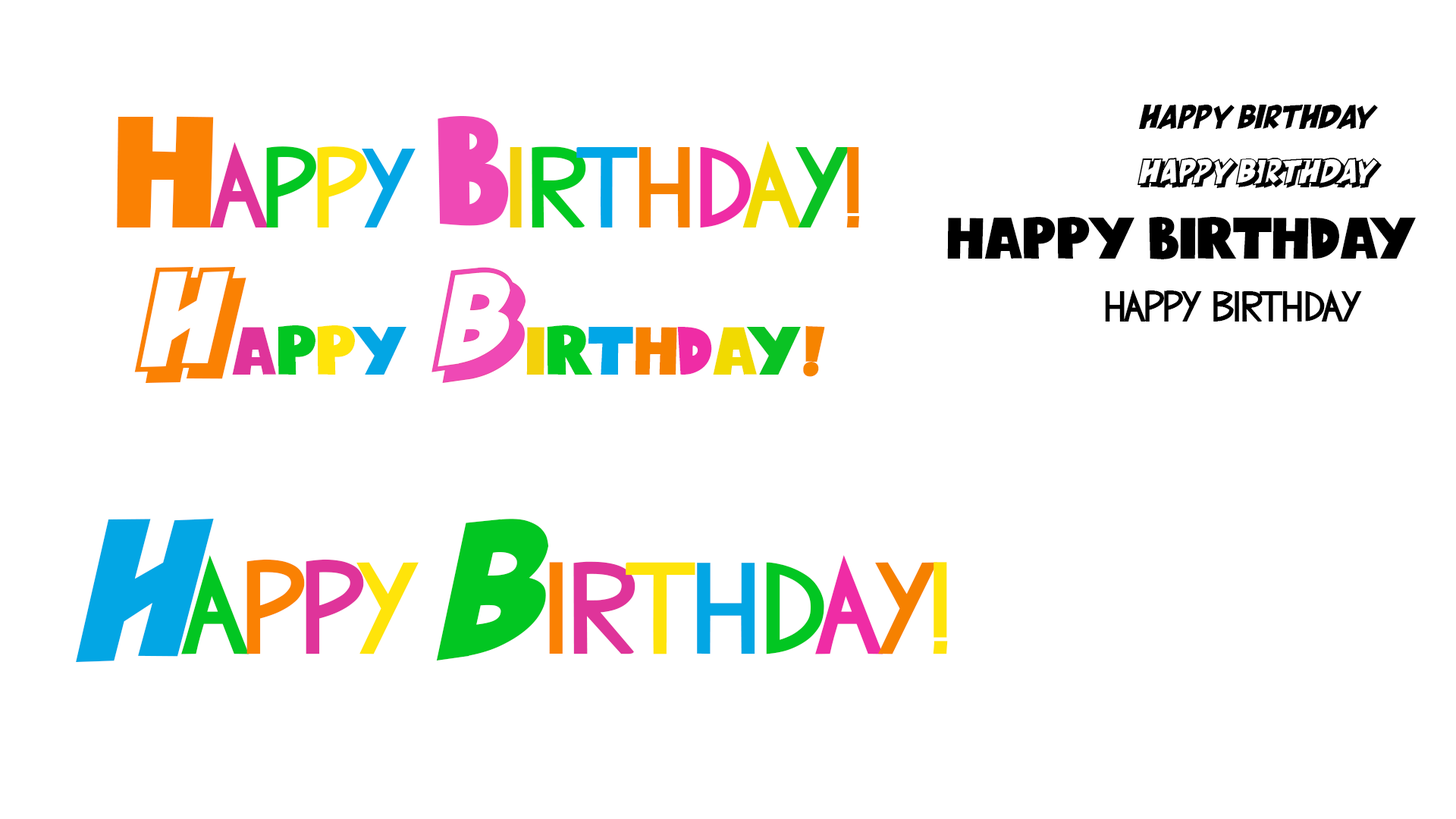
<style>
.page{position:relative;width:1456px;height:819px;background:#ffffff}
.page>*{position:absolute;margin:0}
.t1{font:54.6px "SIMPLCITYPERSONALUSE-Regular";color:#000000}
.t2{font:148.4px "BlueNight-Regular";color:#fa8103}
.t3{font:140.2px "BlueNight-Regular";color:#ef49b5;scale:0.94 1}
.t4{font:144px "birthdaycard";color:#df349a}
.t5{font:144px "birthdaycard";color:#02c622}
.t6{font:144px "birthdaycard";color:#ffe40a}
.t7{font:144px "birthdaycard";color:#03a6e4}
.t8{font:146.4px "birthdaycard";color:#f3d10b}
.t9{font:146.4px "birthdaycard";color:#00c821}
.t10{font:146.4px "birthdaycard";color:#01a6e7}
.t11{font:146.4px "birthdaycard";color:#f68100}
.t12{font:146.4px "birthdaycard";color:#ef2ca5}
.t13{font:146.4px "birthdaycard";color:#f1da01}
.t14{font:146.4px "birthdaycard";color:#0ac224}
.t15{font:54.6px "SIMPLICITYSHADOWPERSONALUSE-Reg";color:#000000}
.t16{font:54.6px "BlueNight-Regular";color:#000000}
.t17{font:216.1px "SIMPLICITYSHADOWPERSONALUSE-Reg";color:#fa8103}
.t18{font:216.1px "SIMPLICITYSHADOWPERSONALUSE-Reg";color:#eb479e}
.t19{font:54.6px "birthdaycard";color:#000000}
.t20{font:63.5px "BlueNight-Regular";color:#df349a}
.t21{font:63.5px "BlueNight-Regular";color:#02c622}
.t22{font:63.5px "BlueNight-Regular";color:#ffe40a}
.t23{font:63.5px "BlueNight-Regular";color:#03a6e4}
.t24{font:63.5px "BlueNight-Regular";color:#f3d10b}
.t25{font:63.5px "BlueNight-Regular";color:#00c821}
.t26{font:63.5px "BlueNight-Regular";color:#01a6e7}
.t27{font:63.5px "BlueNight-Regular";color:#f68100}
.t28{font:63.5px "BlueNight-Regular";color:#ef2ca5}
.t29{font:63.5px "BlueNight-Regular";color:#f1da01}
.t30{font:63.5px "BlueNight-Regular";color:#0ac224}
.t31{font:63.5px "BlueNight-Regular";color:#f68400}
.t32{font:325.7px "SIMPLCITYPERSONALUSE-Regular";color:#03a6e4}
.t33{font:325.7px "SIMPLCITYPERSONALUSE-Regular";color:#02c622}
.t34{font:167.1px "birthdaycard";color:#02c622}
.t35{font:167.1px "birthdaycard";color:#fa8103}
.t36{font:167.1px "birthdaycard";color:#df349a}
.t37{font:167.1px "birthdaycard";color:#ffe40a}
.t38{font:167.1px "birthdaycard";color:#03a6e4}
.t39{font:167.1px "birthdaycard";color:#ef2ca5}
.t40{font:167.1px "birthdaycard";color:#f68100}
</style>
<div class="page">
<p class="t1" style="left:1138px;top:105px;width:240px;height:24px">HAPpy birthday</p>
<p class="t2" style="left:117px;top:116px;width:97px;height:111px">H</p>
<p class="t3" style="left:438px;top:116px;width:71px;height:110px">B</p>
<p class="t4" style="left:209px;top:142px;width:207px;height:85px">a<span class="t5">p</span><span class="t6">p</span><span class="t7">y</span></p>
<p class="t8" style="left:510px;top:140px;width:350px;height:88px">i<span class="t9">r</span><span class="t10">T</span><span class="t11">h</span><span class="t12">d</span><span class="t13">a</span><span class="t14">y</span><span class="t11">!</span></p>
<p class="t15" style="left:1137px;top:158px;width:245px;height:30px">happy birthday</p>
<p class="t16" style="left:947px;top:217px;width:469px;height:42px">HAPPY BIRTHDAY</p>
<p class="t17" style="left:134px;top:267px;width:112px;height:116px">H</p>
<p class="t18" style="left:431px;top:267px;width:95px;height:116px">B</p>
<p class="t19" style="left:1105px;top:289px;width:257px;height:33px">hAPPY BIRTHday</p>
<p class="t20" style="left:232px;top:325px;width:174px;height:50px">A<span class="t21">P</span><span class="t22">P</span><span class="t23">Y</span></p>
<p class="t24" style="left:526px;top:325px;width:299px;height:52px">I<span class="t25">R</span><span class="t26">T</span><span class="t27">H</span><span class="t28">D</span><span class="t29">A</span><span class="t30">Y</span><span class="t31">!</span></p>
<p class="t32" style="left:76px;top:519px;width:138px;height:143px">H</p>
<p class="t33" style="left:436px;top:519px;width:113px;height:141px">b</p>
<p class="t34" style="left:181px;top:555px;width:238px;height:99px">a<span class="t35">p</span><span class="t36">p</span><span class="t37">y</span></p>
<p class="t35" style="left:549px;top:555px;width:399px;height:99px">i<span class="t36">r</span><span class="t37">T</span><span class="t38">h</span><span class="t34">d</span><span class="t39">a</span><span class="t40">y</span><span class="t37">!</span></p>
</div>
